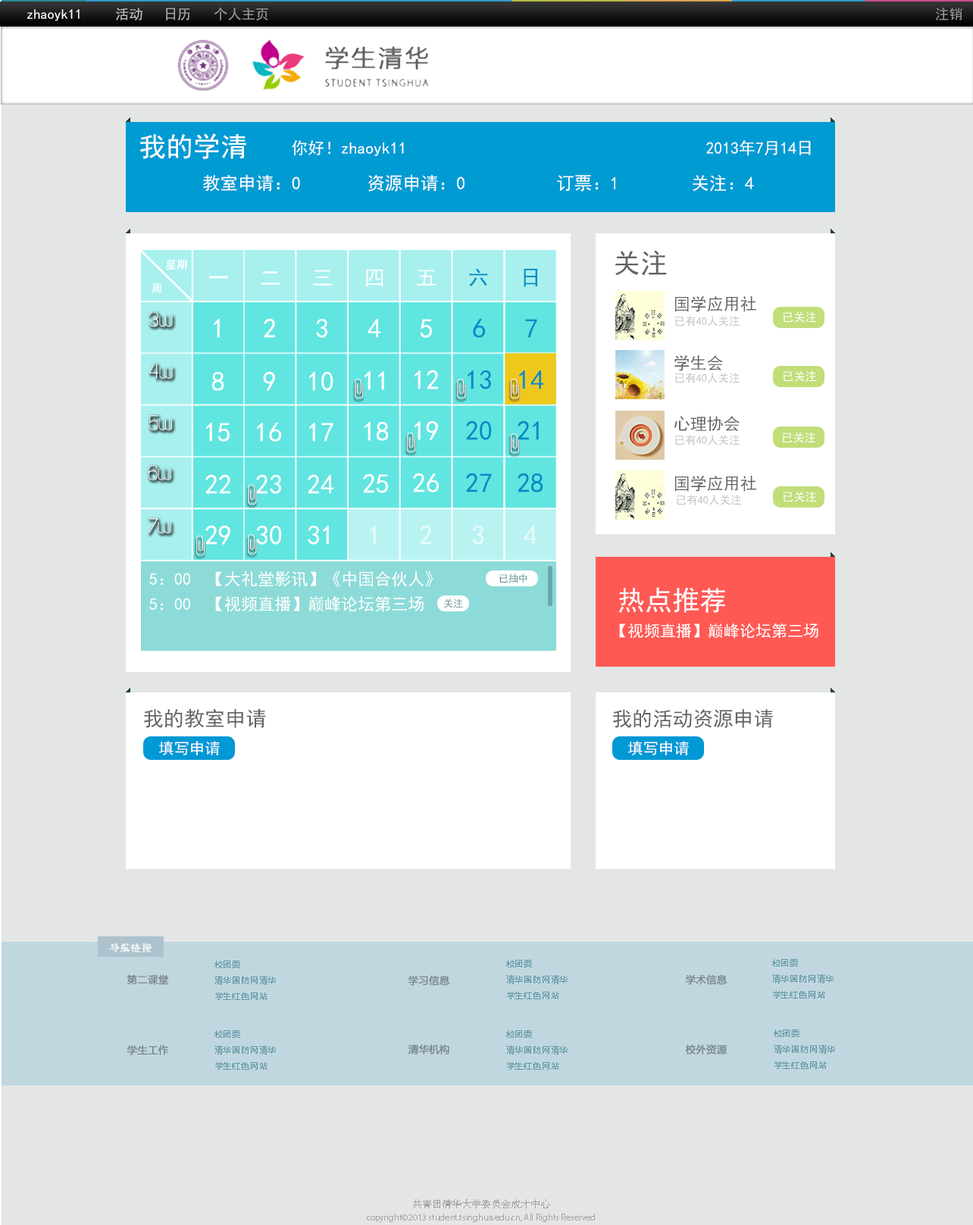
<style>
.page{position:relative;width:973px;height:1225px;background:#e4e6e5}
.page>*{position:absolute;margin:0}
.t1{font:13.8px "SimHei";color:#fffefe}
.t2{font:13.8px "SimHei";color:#c3c3c3}
.t3{font:13.8px "SimHei";color:#a9a9a9}
.t4{font:13.8px "SimHei";color:#9b9b9b}
.t5{font:27.3px "SimHei";color:#ffffff}
.t6{font:16.5px "SimHei";color:#ffffff}
.t7{font:17.9px "SimHei";color:#ffffff}
.t8{font:27.3px "SimHei";color:#636363}
.t9{font:10.9px "SimHei";color:#ffffff}
.t10{font:20.7px "SimHei";color:#ffffff}
.t11{font:20.7px "SimHei";color:#008cc7}
.t12{font:16.6px "SimHei";color:#636363}
.t13{font:11px "SimHei";color:#bfbfbf}
.t14{font:11.5px "SimHei";color:#ffffff}
.t15{font:27.3px "SimHei";color:#008cc7}
.t16{font:27.3px "SimHei";color:#e6fafa}
.t17{font:16.7px "SimHei";color:#ffffff}
.t18{font:9.8px "SimHei";color:#5d908e}
.t19{font:15.9px "SimHei";color:#ffffff}
.t20{font:20.6px "SimHei";color:#636363}
.t21{font:20.2px "SimHei";color:#636363}
.t22{font:15.5px "SimHei";color:#ffffff}
.t23{font:10.1px "STSong";color:#ffffff;font-weight:bold}
.t24{font:8.1px/16.2px "MicrosoftYaHei";letter-spacing:0.075em;color:#5f97a3}
.t25{font:10.1px "MicrosoftYaHei";color:#7a888e;font-weight:bold}
.t26{font:9.1px/14.1px "MyriadPro-Regular";color:#a2a3a2}
.t27{font:10.1px/14.1px "STSong";color:#a2a3a2}
</style>
<div class="page">
<p class="t1" style="left:27px;top:9px;width:53px;height:12px">zhaoyk11</p>
<p class="t2" style="left:116px;top:8px;width:26px;height:12px">活动</p>
<p class="t3" style="left:166px;top:8px;width:24px;height:12px">日历</p>
<p class="t4" style="left:214px;top:8px;width:54px;height:12px">个人主页</p>
<p class="t4" style="left:936px;top:8px;width:26px;height:12px">注销</p>
<p class="t5" style="left:140px;top:133px;width:106px;height:26px">我的学清</p>
<p class="t6" style="left:292px;top:140px;width:112px;height:16px">你好！zhaoyk11</p>
<p class="t6" style="left:706px;top:140px;width:105px;height:16px">2013年7月14日</p>
<p class="t7" style="left:203px;top:174px;width:97px;height:18px">教室申请：0</p>
<p class="t7" style="left:368px;top:174px;width:97px;height:18px">资源申请：0</p>
<p class="t7" style="left:557px;top:175px;width:58px;height:17px">订票：1</p>
<p class="t7" style="left:693px;top:174px;width:61px;height:18px">关注：4</p>
<p class="t8" style="left:615px;top:250px;width:52px;height:26px">关注</p>
<p class="t9" style="left:166px;top:259px;width:21px;height:11px">星期</p>
<p class="t10" style="left:209px;top:268px;width:328px;height:19px">一   二   三   四   五 <span class="t11">  六   日</span></p>
<p class="t9" style="left:152px;top:283px;width:9px;height:10px">周</p>
<p class="t12" style="left:675px;top:296px;width:81px;height:16px">国学应用社</p>
<p class="t13" style="left:675px;top:316px;width:65px;height:11px">已有40人关注</p>
<p class="t14" style="left:783px;top:311px;width:33px;height:12px">已关注</p>
<p class="t5" style="left:214px;top:319px;width:6px;height:19px">1</p>
<p class="t5" style="left:264px;top:318px;width:11px;height:20px">2</p>
<p class="t5" style="left:316px;top:319px;width:11px;height:19px">3</p>
<p class="t5" style="left:368px;top:319px;width:13px;height:19px">4</p>
<p class="t5" style="left:420px;top:319px;width:12px;height:19px">5</p>
<p class="t15" style="left:473px;top:319px;width:12px;height:19px">6</p>
<p class="t15" style="left:525px;top:319px;width:12px;height:19px">7</p>
<p class="t12" style="left:674px;top:355px;width:49px;height:16px">学生会</p>
<p class="t5" style="left:212px;top:372px;width:12px;height:19px">8</p>
<p class="t5" style="left:263px;top:371px;width:12px;height:20px">9</p>
<p class="t5" style="left:309px;top:371px;width:24px;height:20px">10</p>
<p class="t5" style="left:365px;top:371px;width:19px;height:19px">11</p>
<p class="t5" style="left:415px;top:370px;width:23px;height:20px">12</p>
<p class="t15" style="left:468px;top:371px;width:23px;height:19px">13</p>
<p class="t15" style="left:519px;top:371px;width:25px;height:19px">14</p>
<p class="t13" style="left:675px;top:373px;width:65px;height:10px">已有40人关注</p>
<p class="t14" style="left:783px;top:371px;width:33px;height:11px">已关注</p>
<p class="t5" style="left:206px;top:423px;width:24px;height:19px">15</p>
<p class="t5" style="left:257px;top:423px;width:24px;height:19px">16</p>
<p class="t5" style="left:309px;top:423px;width:24px;height:19px">17</p>
<p class="t5" style="left:365px;top:422px;width:24px;height:19px">18</p>
<p class="t5" style="left:415px;top:421px;width:23px;height:19px">19</p>
<p class="t15" style="left:466px;top:421px;width:26px;height:19px">20</p>
<p class="t15" style="left:518px;top:421px;width:21px;height:19px">21</p>
<p class="t12" style="left:674px;top:416px;width:66px;height:16px">心理协会</p>
<p class="t13" style="left:675px;top:435px;width:65px;height:11px">已有40人关注</p>
<p class="t14" style="left:782px;top:432px;width:33px;height:11px">已关注</p>
<p class="t5" style="left:363px;top:474px;width:25px;height:19px">25</p>
<p class="t5" style="left:413px;top:473px;width:26px;height:20px">26</p>
<p class="t15" style="left:466px;top:473px;width:26px;height:20px">27</p>
<p class="t15" style="left:518px;top:473px;width:25px;height:20px">28</p>
<p class="t5" style="left:205px;top:474px;width:25px;height:20px">22</p>
<p class="t5" style="left:256px;top:474px;width:25px;height:20px">23</p>
<p class="t5" style="left:308px;top:474px;width:26px;height:20px">24</p>
<p class="t12" style="left:675px;top:475px;width:81px;height:17px">国学应用社</p>
<p class="t13" style="left:677px;top:495px;width:64px;height:10px">已有40人关注</p>
<p class="t14" style="left:783px;top:491px;width:33px;height:11px">已关注</p>
<p class="t5" style="left:205px;top:525px;width:25px;height:20px">29</p>
<p class="t5" style="left:256px;top:525px;width:26px;height:20px">30</p>
<p class="t5" style="left:308px;top:526px;width:21px;height:19px">31</p>
<p class="t16" style="left:370px;top:526px;width:6px;height:19px">1</p>
<p class="t16" style="left:420px;top:525px;width:11px;height:20px">2</p>
<p class="t16" style="left:472px;top:526px;width:12px;height:19px">3</p>
<p class="t16" style="left:524px;top:526px;width:13px;height:19px">4</p>
<p class="t17" style="left:149px;top:571px;width:284px;height:16px">5：00  【大礼堂影讯】《中国合伙人》</p>
<p class="t18" style="left:499px;top:574px;width:28px;height:10px">已抽中</p>
<p class="t5" style="left:618px;top:587px;width:107px;height:26px">热点推荐</p>
<p class="t17" style="left:149px;top:596px;width:275px;height:16px">5：00  【视频直播】巅峰论坛第三场</p>
<p class="t18" style="left:444px;top:599px;width:19px;height:10px">关注</p>
<p class="t19" style="left:619px;top:623px;width:199px;height:16px">【视频直播】巅峰论坛第三场</p>
<p class="t20" style="left:144px;top:709px;width:122px;height:19px">我的教室申请</p>
<p class="t21" style="left:613px;top:709px;width:160px;height:19px">我的活动资源申请</p>
<p class="t22" style="left:159px;top:741px;width:61px;height:15px">填写申请</p>
<p class="t22" style="left:628px;top:741px;width:61px;height:15px">填写申请</p>
<p class="t23" style="left:109px;top:944px;width:43px;height:9px;opacity:0.7">导航链接</p>
<p class="t24" style="left:214px;top:961px;width:62px;height:39px">校团委<br>清华国防网清华<br>学生红色网站</p>
<p class="t24" style="left:506px;top:960px;width:62px;height:40px">校团委<br>清华国防网清华<br>学生红色网站</p>
<p class="t24" style="left:772px;top:959px;width:62px;height:40px">校团委<br>清华国防网清华<br>学生红色网站</p>
<p class="t25" style="left:127px;top:975px;width:42px;height:10px">第二课堂</p>
<p class="t25" style="left:408px;top:975px;width:42px;height:11px">学习信息</p>
<p class="t25" style="left:685px;top:975px;width:43px;height:10px">学术信息</p>
<p class="t24" style="left:214px;top:1031px;width:62px;height:39px">校团委<br>清华国防网清华<br>学生红色网站</p>
<p class="t24" style="left:506px;top:1031px;width:62px;height:39px">校团委<br>清华国防网清华<br>学生红色网站</p>
<p class="t24" style="left:774px;top:1030px;width:61px;height:39px">校团委<br>清华国防网清华<br>学生红色网站</p>
<p class="t25" style="left:127px;top:1045px;width:42px;height:11px">学生工作</p>
<p class="t25" style="left:408px;top:1044px;width:41px;height:11px">清华机构</p>
<p class="t25" style="left:685px;top:1044px;width:43px;height:11px">校外资源</p>
<p class="t26" style="left:367px;top:1200px;width:228px;height:23px;text-align:center"><span class="t27">共青团清华大学委员会成才中心<br></span>copyright©2013 student.tsinghua.edu.cn, All Rights Reserved</p>
</div>
